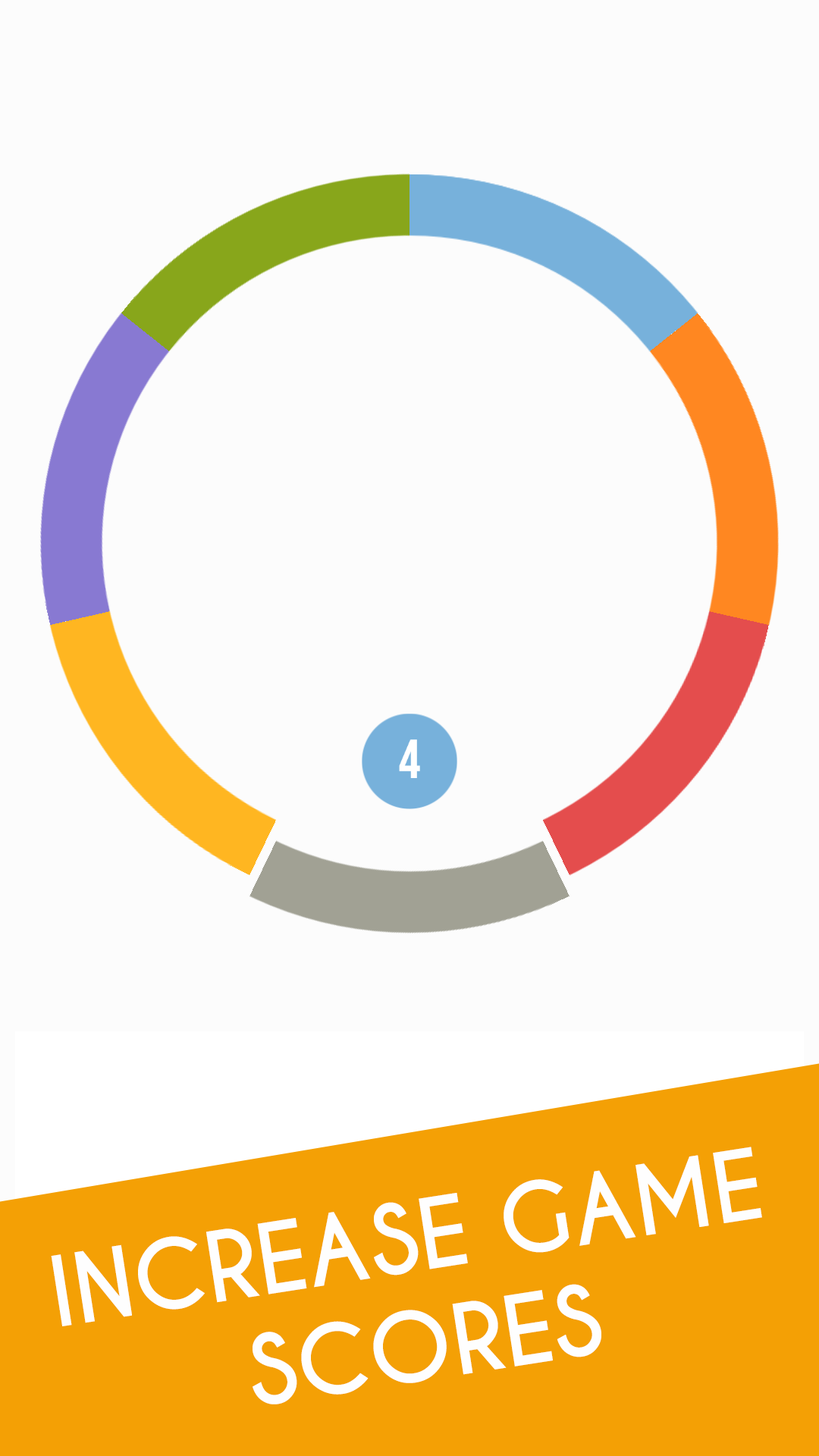
<style>
.page{position:relative;width:819px;height:1456px;background:#fcfcfc}
.page>*{position:absolute;margin:0}
.t1{font:91px "CaviarDreams-Bold";color:#fefefe}
</style>
<div class="page">
<p class="t1" style="left:51px;top:1147px;width:711px;height:257px;text-align:center;rotate:-9deg">INCREASE GAME <br>       SCORES</p>
</div>
